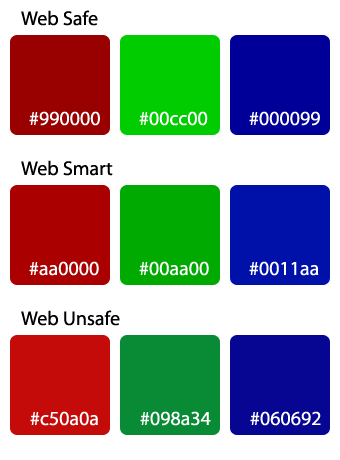
<style>
.page{position:relative;width:340px;height:460px;background:#ffffff}
.page>*{position:absolute;margin:0}
.t1{font:20px "MyriadPro-Regular";color:#000000}
.t2{font:20px "MyriadPro-Regular";color:#ffffff}
</style>
<div class="page">
<p class="t1" style="left:21px;top:10px;width:77px;height:16px">Web Safe</p>
<p class="t2" style="left:29px;top:111px;width:71px;height:15px">#990000</p>
<p class="t2" style="left:139px;top:111px;width:69px;height:15px">#00cc00</p>
<p class="t2" style="left:249px;top:111px;width:71px;height:15px">#000099</p>
<p class="t1" style="left:21px;top:160px;width:92px;height:16px">Web Smart</p>
<p class="t2" style="left:29px;top:261px;width:70px;height:15px">#aa0000</p>
<p class="t2" style="left:139px;top:261px;width:70px;height:15px">#00aa00</p>
<p class="t2" style="left:249px;top:261px;width:70px;height:15px">#0011aa</p>
<p class="t1" style="left:21px;top:310px;width:99px;height:16px">Web Unsafe</p>
<p class="t2" style="left:30px;top:411px;width:68px;height:15px">#c50a0a</p>
<p class="t2" style="left:140px;top:411px;width:71px;height:15px">#098a34</p>
<p class="t2" style="left:250px;top:411px;width:71px;height:15px">#060692</p>
</div>
